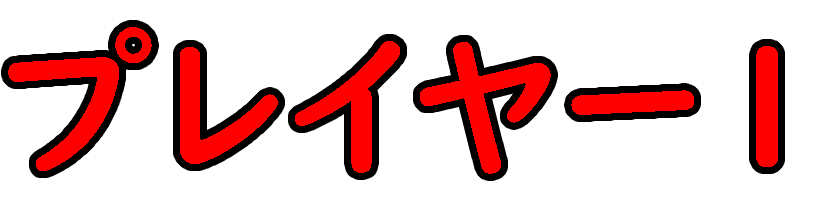
<style>
.page{position:relative;width:826px;height:200px;background:#ffffff}
.page>*{position:absolute;margin:0}
.t1{font:161.6px "UDDigiKyokashoNK-B";color:#ff0000}
</style>
<div class="page">
<p class="t1" style="left:8px;top:27px;width:770px;height:147px">プレイヤー1</p>
</div>
